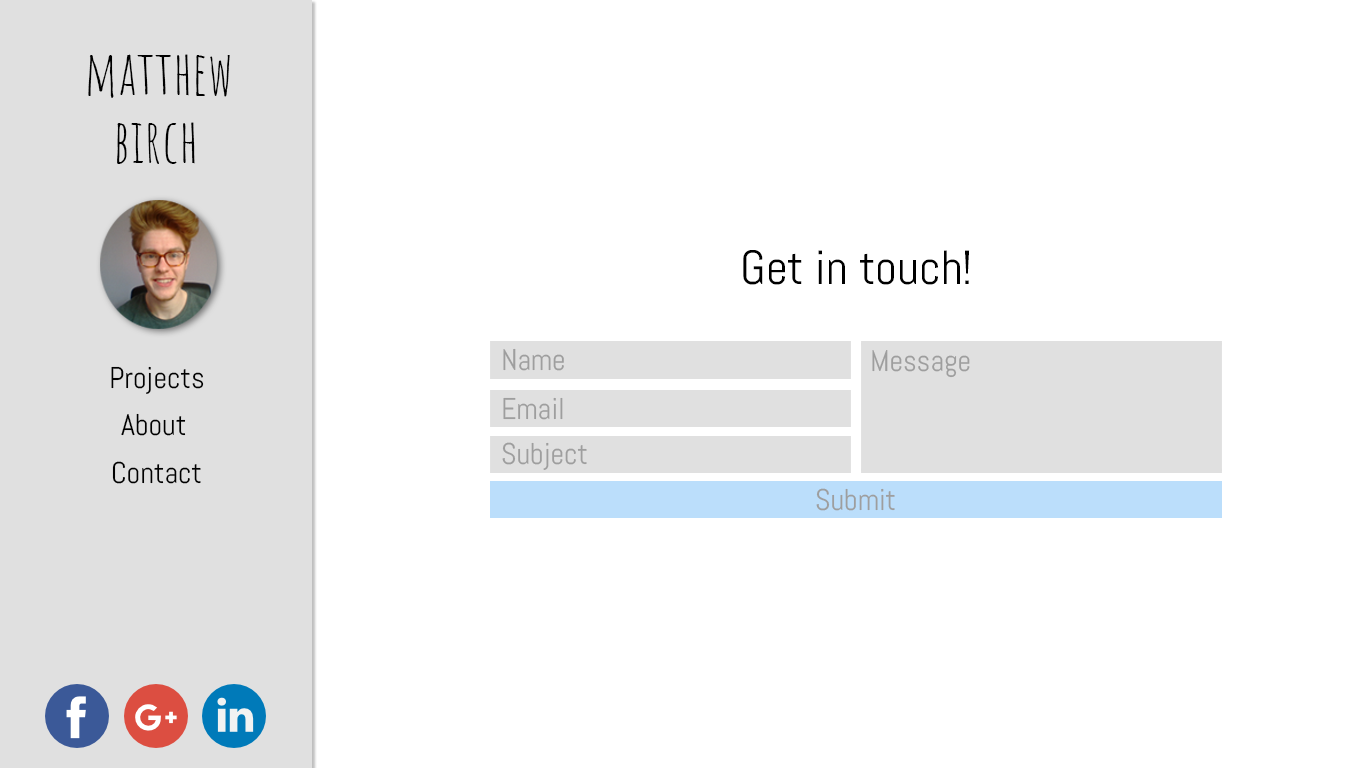
<style>
.page{position:relative;width:1366px;height:768px;background:#ffffff}
.page>*{position:absolute;margin:0}
.t1{font:60px "AmaticSC-Regular";color:#000000}
.t2{font:48px "Abel-Regular";color:#000000}
.t3{font:30px "Abel-Regular";color:#9e9e9e}
.t4{font:30px "Abel-Regular";color:#000000}
</style>
<div class="page">
<p class="t1" style="left:88px;top:54px;width:142px;height:44px">matthew</p>
<p class="t1" style="left:117px;top:122px;width:78px;height:42px">birch</p>
<p class="t2" style="left:743px;top:250px;width:227px;height:35px">Get in touch!</p>
<p class="t3" style="left:503px;top:348px;width:61px;height:23px">Name</p>
<p class="t3" style="left:872px;top:350px;width:98px;height:28px">Message</p>
<p class="t4" style="left:111px;top:366px;width:93px;height:28px">Projects</p>
<p class="t3" style="left:503px;top:397px;width:60px;height:23px">Email</p>
<p class="t4" style="left:121px;top:413px;width:65px;height:23px">About</p>
<p class="t3" style="left:502px;top:442px;width:85px;height:28px">Subject</p>
<p class="t4" style="left:112px;top:461px;width:89px;height:23px">Contact</p>
<p class="t3" style="left:816px;top:488px;width:79px;height:23px">Submit</p>
</div>
